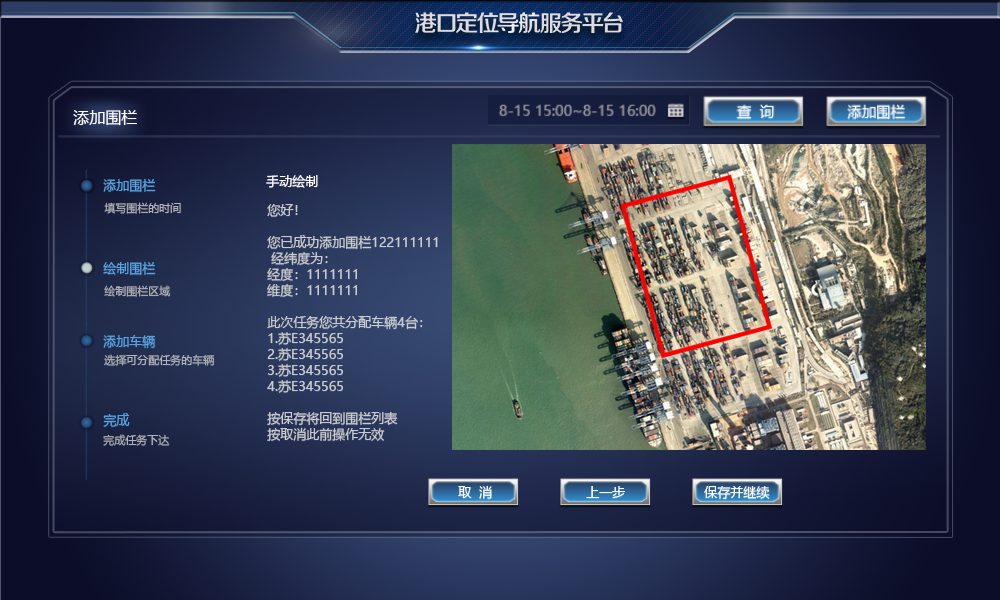
<style>
.page{position:relative;width:1000px;height:600px}
.page>*{position:absolute;margin:0}
.t1{font:16px "MicrosoftYaHei";color:#fdfdfd}
.t2{font:13px "MicrosoftYaHei";color:#59a4e0}
.t3{font:13px "MicrosoftYaHei";color:#ffffff}
.t4{font:11px "MicrosoftYaHei";color:#b2b3b6}
.t5{font:13px/8px "MicrosoftYaHei";color:#cccccc}
.t6{font:11px "MicrosoftYaHei";color:#b3b4b7}
.t7{font:11px "MicrosoftYaHei";color:#b3b4b8}
</style>
<div class="page">
<p class="t1" style="left:73px;top:110px;width:64px;height:16px">添加围栏</p>
<p class="t2" style="left:103px;top:178px;width:53px;height:14px">添加围栏</p>
<p class="t3" style="left:266px;top:175px;width:52px;height:13px">手动绘制</p>
<p class="t4" style="left:104px;top:202px;width:77px;height:12px">填写围栏的时间</p>
<p class="t5" style="left:267px;top:203px;width:171px;height:238px">您好！<br><br> <br><br>您已成功添加围栏122111111<br><br> 经纬度为：<br><br>经度：1111111 <br><br>维度：1111111<br><br> <br><br>此次任务您共分配车辆4台：<br><br>1.苏E345565<br><br>2.苏E345565<br><br>3.苏E345565<br><br>4.苏E345565<br><br> <br><br>按保存将回到围栏列表<br><br>按取消此前操作无效</p>
<p class="t2" style="left:103px;top:261px;width:53px;height:14px">绘制围栏</p>
<p class="t6" style="left:104px;top:285px;width:67px;height:12px">绘制围栏区域</p>
<p class="t2" style="left:103px;top:335px;width:52px;height:14px">添加车辆</p>
<p class="t7" style="left:104px;top:354px;width:111px;height:12px">选择可分配任务的车辆</p>
<p class="t2" style="left:103px;top:413px;width:27px;height:14px">完成</p>
<p class="t4" style="left:103px;top:434px;width:67px;height:12px">完成任务下达</p>
<p class="t3" style="left:458px;top:485px;width:34px;height:14px">取  消</p>
<p class="t3" style="left:586px;top:486px;width:39px;height:12px">上一步</p>
<p class="t3" style="left:704px;top:486px;width:66px;height:13px">保存并继续</p>
</div>
